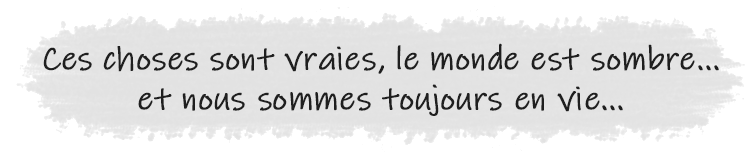
<style>
.page{position:relative;width:750px;height:160px;background:#ffffff}
.page>*{position:absolute;margin:0}
.t1{font:33.3px "InkFree";color:#1f1f1f;font-weight:bold}
</style>
<div class="page">
<p class="t1" style="left:43px;top:43px;width:676px;height:73px;text-align:center">Ces choses sont vraies, le monde est sombre...<br>et nous sommes toujours en vie...</p>
</div>
